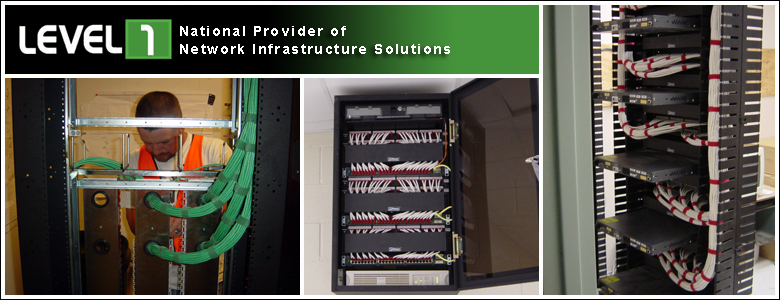
<style>
.page{position:relative;width:780px;height:300px}
.page>*{position:absolute;margin:0}
.t1{font:14px/18px "Arial-BoldMT";letter-spacing:0.1em;color:#ffffff}
</style>
<div class="page">
<p class="t1" style="left:180px;top:26px;width:270px;height:28px">National Provider of<br>Network Infrastructure Solutions</p>
</div>
